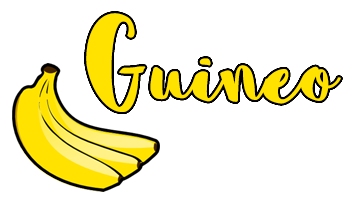
<style>
.page{position:relative;width:358px;height:205px;background:#ffffff}
.page>*{position:absolute;margin:0}
.t1{font:126.4px "Sophia";letter-spacing:0.02em;color:#ffe200}
</style>
<div class="page">
<p class="t1" style="left:86px;top:13px;width:255px;height:99px">Guineo</p>
</div>
